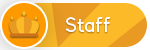
<style>
.page{position:relative;width:150px;height:50px;background:#fcba29}
.page>*{position:absolute;margin:0}
.t1{font:20.2px "Biko";color:#ffffff}
</style>
<div class="page">
<p class="t1" style="left:65px;top:17px;width:45px;height:15px">Staff</p>
</div>
